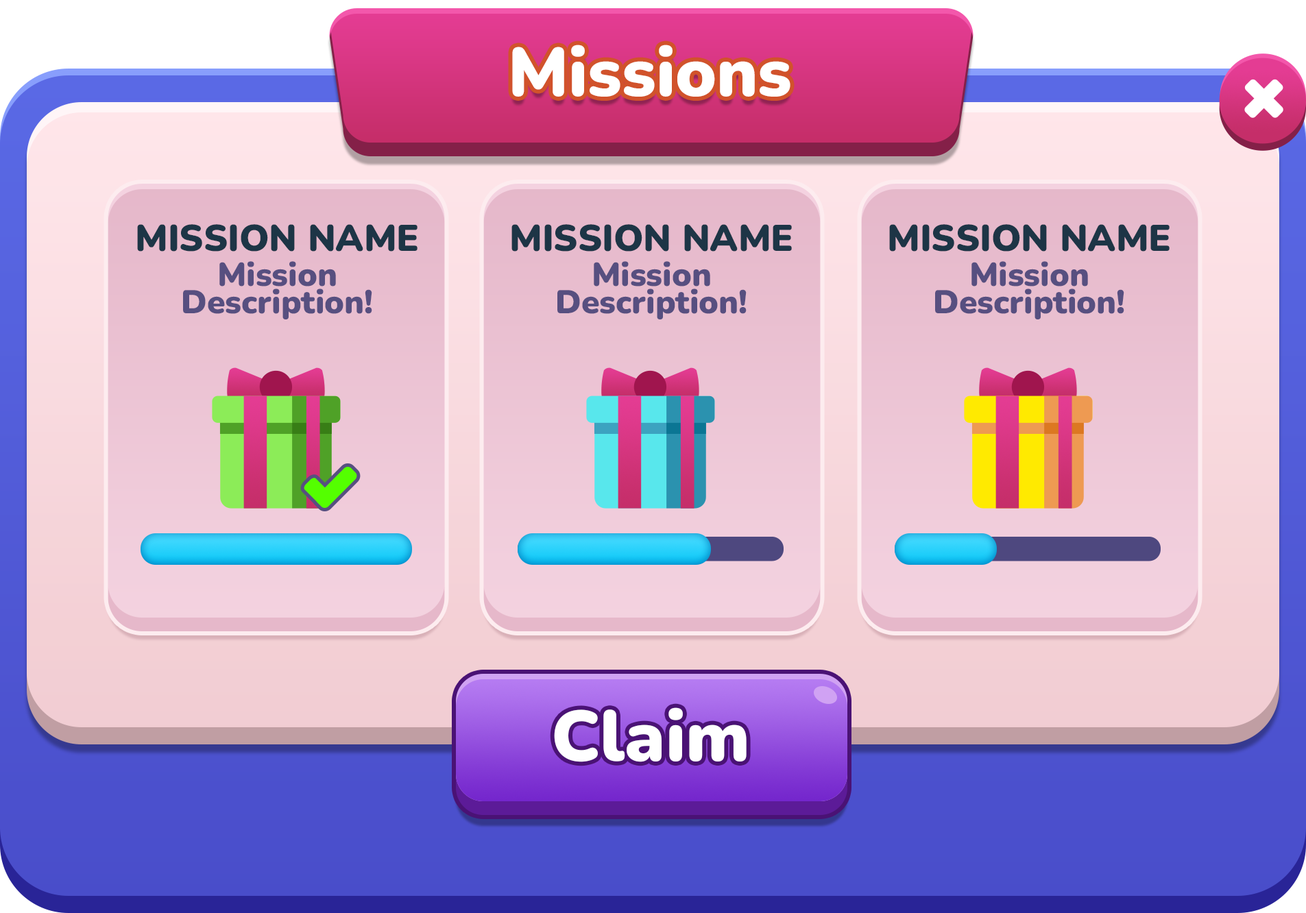
<style>
.page{position:relative;width:1306px;height:913px}
.page>*{position:absolute;margin:0}
.t1{font:68.6px "Nunito-Black";color:#ffffff}
.t2{font:37px "Nunito-Black";color:#1d3546}
.t3{font:32.9px/27.4px "Nunito-Black";color:#574f80}
.t4{font:71.3px "Nunito-Black";color:#ffffff}
</style>
<div class="page">
<p class="t1" style="left:512px;top:45px;width:278px;height:52px">Missions</p>
<p class="t2" style="left:137px;top:224px;width:280px;height:28px">MISSION NAME</p>
<p class="t2" style="left:511px;top:224px;width:281px;height:28px">MISSION NAME</p>
<p class="t2" style="left:889px;top:224px;width:280px;height:28px">MISSION NAME</p>
<p class="t3" style="left:183px;top:261px;width:189px;height:58px;text-align:center">Mission<br>Description!</p>
<p class="t3" style="left:557px;top:261px;width:190px;height:58px;text-align:center">Mission<br>Description!</p>
<p class="t3" style="left:935px;top:261px;width:189px;height:58px;text-align:center">Mission<br>Description!</p>
<p class="t4" style="left:554px;top:707px;width:193px;height:55px">Claim</p>
</div>
